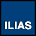
<style>
.page{position:relative;width:36px;height:36px;background:#003f79}
.page>*{position:absolute;margin:0}
.t1{font:10.2px "HelveticaNeue-Bold";letter-spacing:0.025em;color:#ffffff}
</style>
<div class="page">
<p class="t1" style="left:5px;top:21px;width:27px;height:9px">ILIAS</p>
</div>
